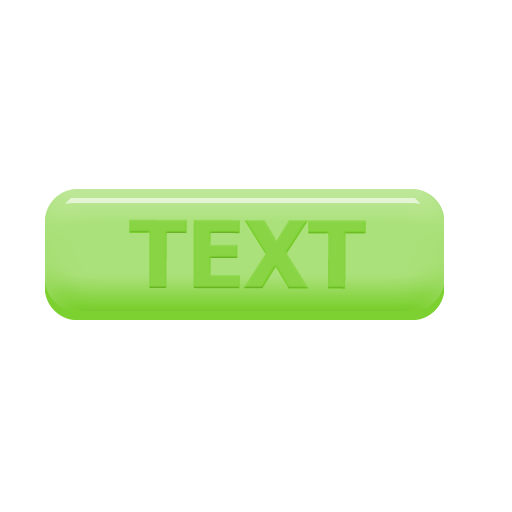
<style>
.page{position:relative;width:512px;height:512px;background:#ffffff}
.page>*{position:absolute;margin:0}
.t1{font:93.7px "Tahoma-Bold";color:#88d444;text-transform:uppercase}
</style>
<div class="page">
<p class="t1" style="left:129px;top:219px;width:237px;height:70px">text</p>
</div>
